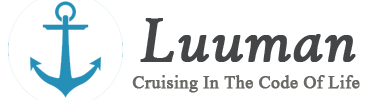
<style>
.page{position:relative;width:370px;height:100px;background:#ffffff}
.page>*{position:absolute;margin:0}
.t1{font:67px "HighTowerText-Italic";color:#434546;font-weight:bold}
.t2{font:22px "Aparajita";color:#666964;font-weight:bold}
</style>
<div class="page">
<p class="t1" style="left:140px;top:18px;width:216px;height:44px">Luuman</p>
<p class="t2" style="left:132px;top:75px;width:228px;height:18px">Cruising In The Code Of Life</p>
</div>
